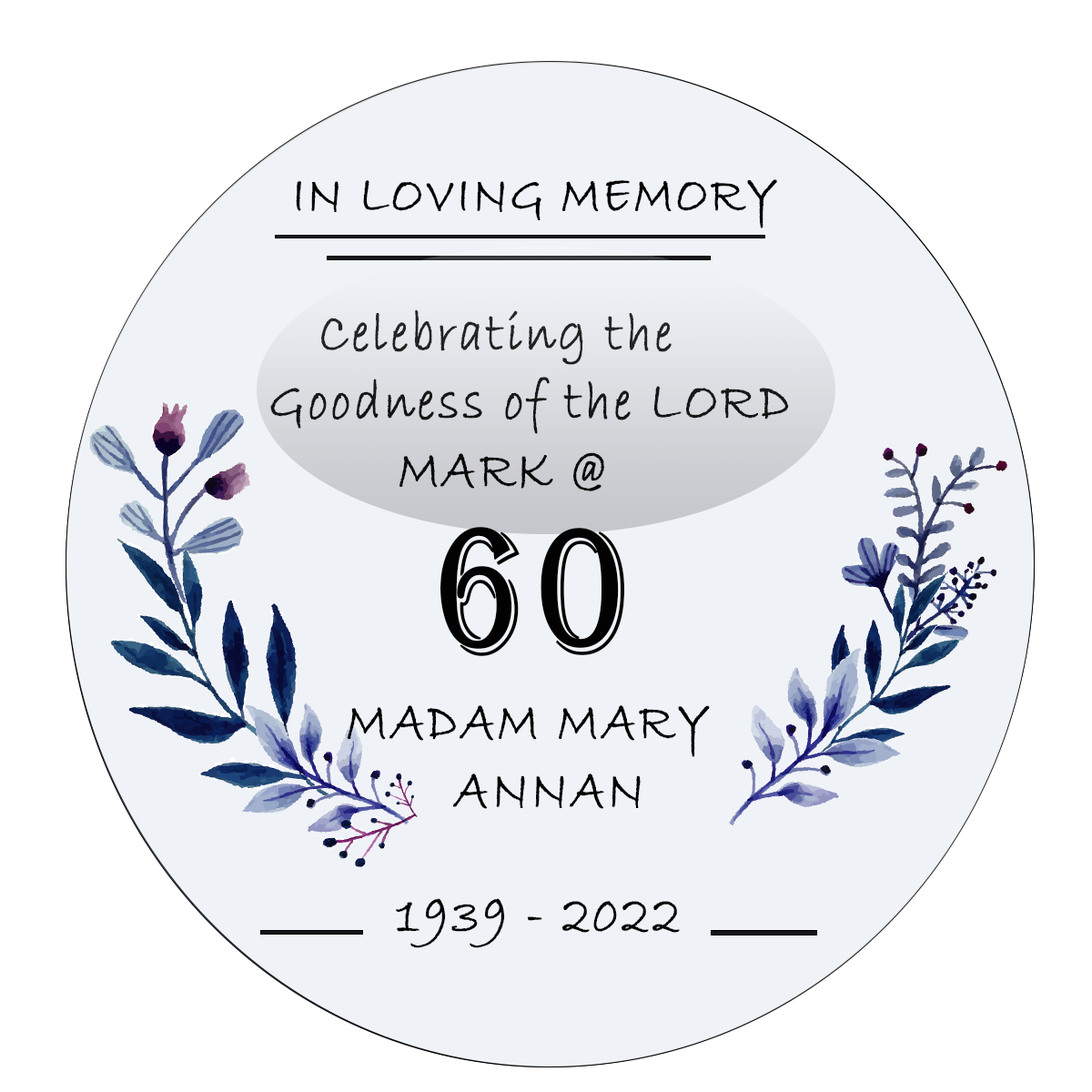
<style>
.page{position:relative;width:1092px;height:1092px;background:#eff2f7}
.page>*{position:absolute;margin:0}
.t1{font:54px "BradleyHandITC";letter-spacing:0.05em;color:#020202;font-weight:bold;scale:0.83 1}
.t2{font:56.9px/68.2px "BradleyHandITC";letter-spacing:0.05em;color:#020202;font-weight:bold;scale:0.83 1}
.t3{font:183.1px "Algerian";letter-spacing:0.05em;color:#020202;font-weight:bold;scale:0.83 1}
.t4{font:56.9px "BradleyHandITC";letter-spacing:0.05em;color:#020202;font-weight:bold;scale:0.83 1}
</style>
<div class="page">
<p class="t1" style="left:296px;top:179px;width:481px;height:49px">IN LOVING MEMORY</p>
<p class="t2" style="left:270px;top:309px;width:519px;height:182px">Celebrating the Goodness of the LORD<br>        MARK @</p>
<p class="t3" style="left:440px;top:527px;width:185px;height:129px">60</p>
<p class="t4" style="left:348px;top:705px;width:362px;height:52px">MADAM MARY</p>
<p class="t4" style="left:453px;top:773px;width:188px;height:36px">ANNAN</p>
<p class="t4" style="left:396px;top:898px;width:284px;height:50px">1939 - 2022</p>
</div>
